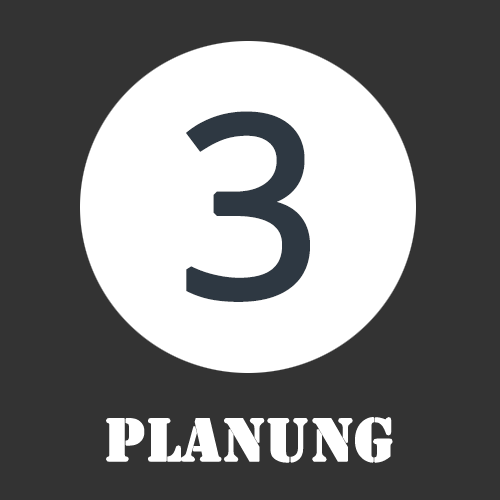
<style>
.page{position:relative;width:500px;height:500px;background:#333333}
.page>*{position:absolute;margin:0}
.t1{font:250px "OpenSans-Regular";color:#2e3842;font-weight:bold}
.t2{font:63px "Stencil";color:#ffffff;font-weight:bold}
</style>
<div class="page">
<p class="t1" style="left:186px;top:111px;width:124px;height:191px">3</p>
<p class="t2" style="left:106px;top:417px;width:287px;height:46px">Planung</p>
</div>
